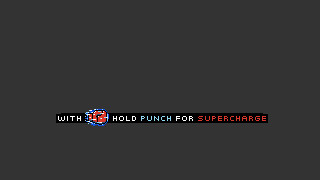
<style>
.page{position:relative;width:320px;height:180px;background:#333333}
.page>*{position:absolute;margin:0}
.t1{font:8px "FrucadeMediumExtended";color:#ffffff}
.t2{font:8px "FrucadeMediumExtended";color:#dc392d}
.t3{font:8px "FrucadeMediumExtended";color:#91d9f3}
</style>
<div class="page">
<p class="t1" style="left:58px;top:116px;width:23px;height:5px">with</p>
<p class="t2" style="left:113px;top:116px;width:153px;height:5px"><span class="t1">         hold </span><span class="t3">PUNCH</span><span class="t1"> for </span>SUPERCHARGE</p>
</div>
